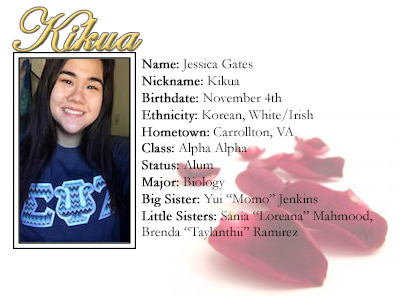
<style>
.page{position:relative;width:400px;height:300px;background:#ffffff}
.page>*{position:absolute;margin:0}
.t1{font:60px "EdwardianScriptITC";font-weight:bold}
.t2{font:14px "Garamond";color:#000000}
.t3{font:14px "Garamond";color:#000000;font-weight:bold}
</style>
<div class="page">
<p class="t1" style="left:13px;top:7px;width:129px;height:46px">Kikua</p>
<p class="t2" style="left:141px;top:58px;width:232px;height:182px"><span class="t3">Name:</span> Jessica Gates<br><span class="t3">Nickname:</span> Kikua<br><span class="t3">Birthdate:</span> November 4th<br><span class="t3">Ethnicity:</span> Korean, White/Irish<br><span class="t3">Hometown:</span> Carrollton, VA<br><span class="t3">Class:</span> Alpha Alpha<br><span class="t3">Status:</span> Alum<br><span class="t3">Major:</span> Biology<br><span class="t3">Big Sister: </span>Yui “Momo” Jenkins<br><span class="t3">Little Sisters: </span>Sania “Loreana” Mahmood, Brenda “Taylanthii” Ramirez</p>
</div>
